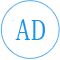
<style>
.page{position:relative;width:60px;height:60px;background:#ffffff}
.page>*{position:absolute;margin:0}
.t1{font:30px "SimSun";color:#1791ee}
.t2{font:0px "SimSun";color:#1791ee}
</style>
<div class="page">
<p class="t1" style="left:15px;top:19px;width:30px;height:21px">A D<span class="t2">VAD</span></p>
</div>
